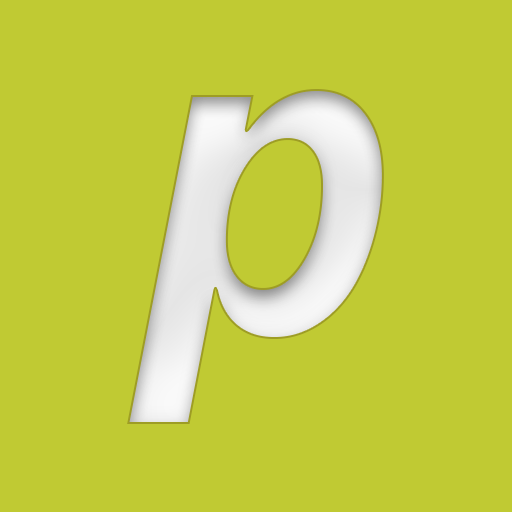
<style>
.page{position:relative;width:512px;height:512px;background:#c0ca33}
.page>*{position:absolute;margin:0}
.t1{font:435.7px "DejaVuSansMonoForPowerline-BoldOblique";color:#e7e7e7}
</style>
<div class="page">
<p class="t1" style="left:127px;top:89px;width:257px;height:335px">p</p>
</div>
